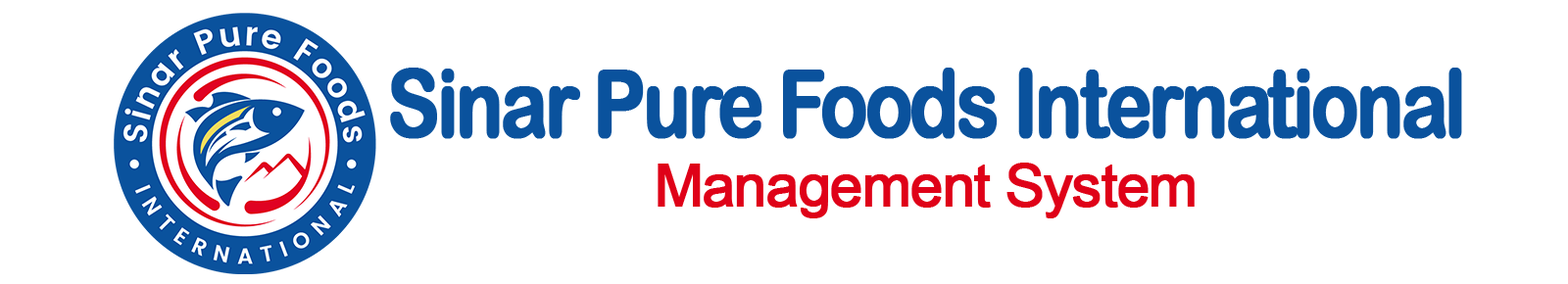
<style>
.page{position:relative;width:1568px;height:284px;background:#ffffff}
.page>*{position:absolute;margin:0}
.t1{font:94.1px "ArialRoundedMTBold";letter-spacing:-0.06em;color:#0a529d;font-weight:bold;scale:0.83 1}
.t2{font:58.8px "ArialMT";letter-spacing:-0.04em;color:#df0118;font-weight:bold}
</style>
<div class="page">
<p class="t1" style="left:390px;top:68px;width:1072px;height:71px">Sinar Pure Foods International</p>
<p class="t2" style="left:658px;top:163px;width:537px;height:56px">Management System</p>
</div>
